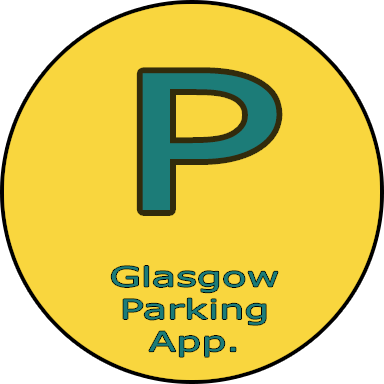
<style>
.page{position:relative;width:384px;height:384px;background:#f9d63e}
.page>*{position:absolute;margin:0}
.t1{font:188px "Verdana";color:#1c7c78;scale:1.49 1}
.t2{font:27px "Verdana";color:#1c7c78;scale:1.49 1}
</style>
<div class="page">
<p class="t1" style="left:142px;top:73px;width:135px;height:137px">P</p>
<p class="t2" style="left:111px;top:266px;width:167px;height:91px;text-align:center">Glasgow<br>Parking App.</p>
</div>
